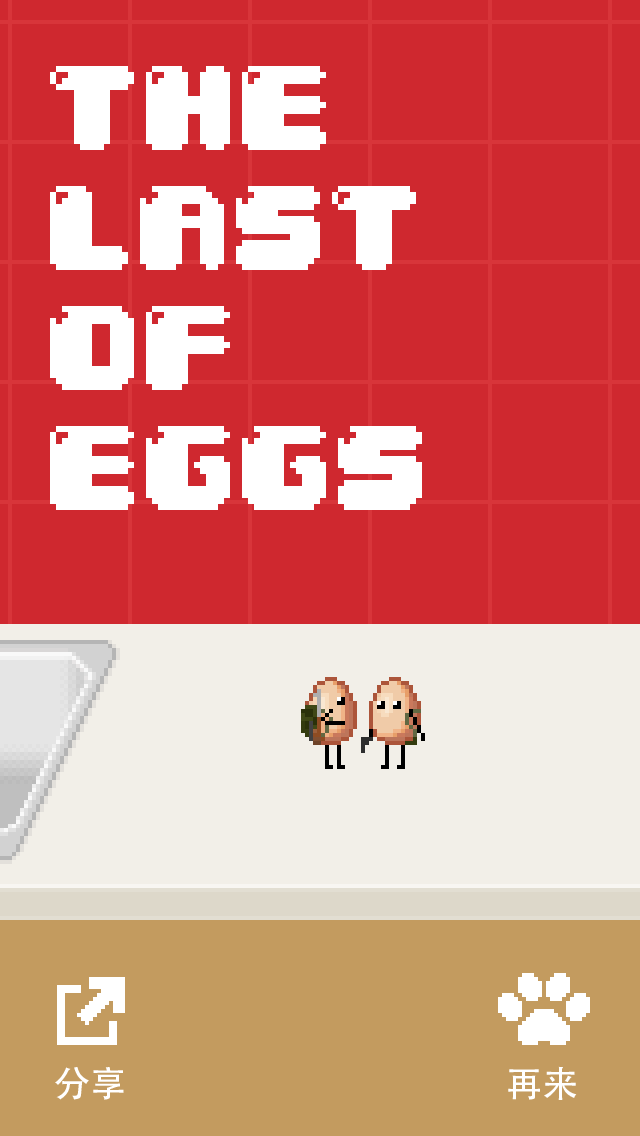
<style>
.page{position:relative;width:640px;height:1136px;background:#cf282f}
.page>*{position:absolute;margin:0}
.t1{font:102px/120px "04b30";color:#ffffff;text-transform:uppercase}
.t2{font:36px "AdobeHeitiStd-Regular";color:#ffffff;text-transform:uppercase}
</style>
<div class="page">
<p class="t1" style="left:50px;top:66px;width:372px;height:444px">The<br>last<br>of<br>eggs</p>
<p class="t2" style="left:55px;top:1067px;width:69px;height:33px">分享</p>
<p class="t2" style="left:508px;top:1066px;width:69px;height:34px">再来</p>
</div>
